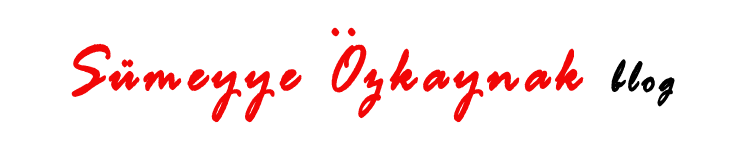
<style>
.page{position:relative;width:744px;height:152px;background:#ffffff}
.page>*{position:absolute;margin:0}
.t1{font:60px "RageItalic";color:#f10707;font-weight:bold}
.t2{font:70.6px "RageItalic";letter-spacing:0.1em;color:#f10707;font-weight:bold;scale:0.81 1}
.t3{font:48px "RageItalic";letter-spacing:0.1em;color:#010101;font-weight:bold;scale:0.81 1}
</style>
<div class="page">
<p class="t1" style="left:331px;top:27px;width:25px;height:10px">..</p>
<p class="t2" style="left:71px;top:43px;width:604px;height:80px">Sümeyye Ozkaynak  <span class="t3">blog</span></p>
</div>
